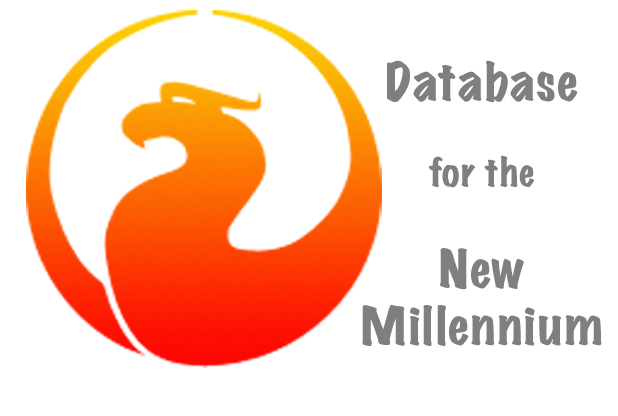
<style>
.page{position:relative;width:618px;height:416px;background:#ffffff}
.page>*{position:absolute;margin:0}
.t1{font:47.8px "MarkerFelt-Wide";color:#7f7f7f}
.t2{font:35.9px "MarkerFelt-Wide";color:#7f7f7f}
</style>
<div class="page">
<p class="t1" style="left:362px;top:60px;width:240px;height:287px;text-align:center">Database<br><span class="t2"><br>for the<br><br></span>New<br>Millennium</p>
</div>
